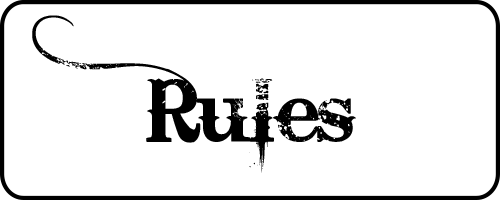
<style>
.page{position:relative;width:500px;height:200px;background:#ffffff}
.page>*{position:absolute;margin:0}
.t1{font:87.5px/150px "BleedingCowboys";color:#000000}
</style>
<div class="page">
<p class="t1" style="left:32px;top:15px;width:324px;height:158px;text-align:center">Rules</p>
</div>
